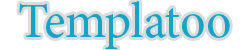
<style>
.page{position:relative;width:250px;height:50px;background:#ffffff}
.page>*{position:absolute;margin:0}
.t1{font:50px "MinionPro-Regular";color:#17a3c6}
</style>
<div class="page">
<p class="t1" style="left:19px;top:1px;width:211px;height:48px">Templatoo</p>
</div>
